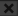
<style>
.page{position:relative;width:18px;height:16px;background:#414141}
.page>*{position:absolute;margin:0}
.t1{font:22px "Arial-BoldMT";letter-spacing:0.01em;color:#121111}
</style>
<div class="page">
<p class="t1" style="left:3px;top:3px;width:11px;height:11px">×</p>
</div>
